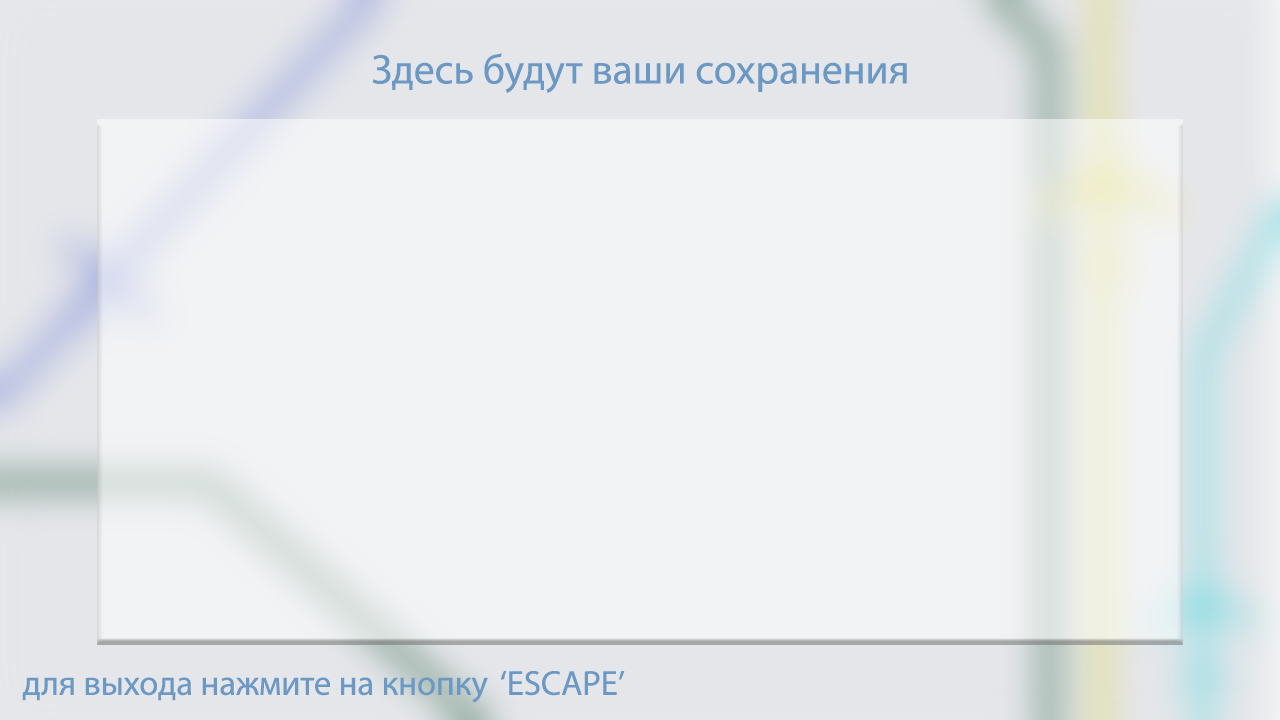
<style>
.page{position:relative;width:1280px;height:720px;background:#f2f3f5}
.page>*{position:absolute;margin:0}
.t1{font:41.7px "MyriadPro-Regular";color:#6b99c3}
.t2{font:34.6px "MyriadPro-Regular";color:#6b99c3}
</style>
<div class="page">
<p class="t1" style="left:372px;top:53px;width:535px;height:40px">Здесь будут ваши сохранения</p>
<p class="t2" style="left:22px;top:671px;width:603px;height:32px">для выхода нажмите на кнопку  ‘ESCAPE’</p>
</div>
